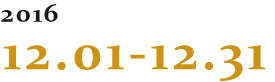
<style>
.page{position:relative;width:275px;height:82px;background:#ffffff}
.page>*{position:absolute;margin:0}
.t1{font:26px "Constantia-Bold";letter-spacing:0.075em;color:#151617}
.t2{font:52px "Constantia-Bold";letter-spacing:0.068em;color:#cc9210}
</style>
<div class="page">
<p class="t1" style="left:1px;top:4px;width:57px;height:18px">2016</p>
<p class="t2" style="left:3px;top:45px;width:263px;height:36px">12.01-12.31</p>
</div>
